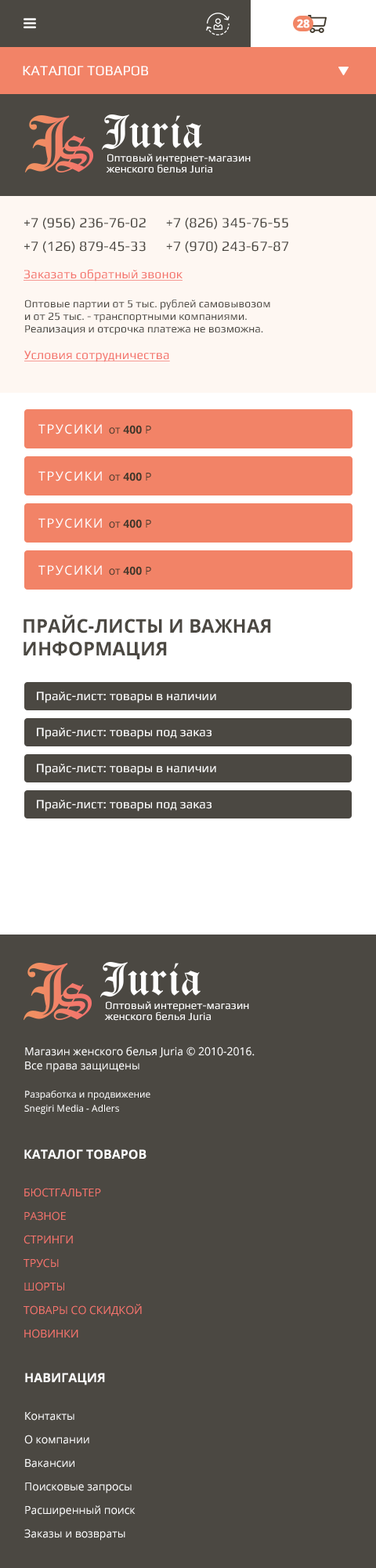
<style>
.page{position:relative;width:376px;height:1568px;background:#4b4842}
.page>*{position:absolute;margin:0}
.t1{font:11px "OpenSans-Bold";color:#fefefe;font-weight:bold}
.t2{font:14.1px "Play";color:#ffffff;text-transform:uppercase}
.t3{font:11px/11px "Play";color:#fefefe}
.t4{font:14.1px/23.5px "Play";color:#4a4741}
.t5{font:12.5px "Play";color:#f4746c;text-decoration:underline}
.t6{font:11px/12.5px "Play";color:#4a4741}
.t7{font:12.5px "OpenSans";letter-spacing:0.1em;color:#fefefe;text-transform:uppercase}
.t8{font:11px "OpenSans";color:#3e372b}
.t9{font:11px "OpenSans-Bold";color:#3e372b}
.t10{font:18.8px "OpenSans-Bold";color:#4b4842;text-transform:uppercase}
.t11{font:12.5px "Play";color:#fefefe}
.t12{font:11px/14.1px "OpenSans";color:#fefefe}
.t13{font:9.4px/14.1px "OpenSans";color:#fefefe}
.t14{font:11px/23.5px "OpenSans";color:#f4746d;text-transform:uppercase}
.t15{font:12.5px/14.1px "OpenSans-Bold";color:#fefefe;text-transform:uppercase}
.t16{font:11px/23.5px "OpenSans";color:#fefefe}
</style>
<div class="page">
<p class="t1" style="left:297px;top:19px;width:13px;height:9px">28</p>
<p class="t2" style="left:23px;top:66px;width:125px;height:10px">каталог товаров</p>
<p class="t3" style="left:106px;top:154px;width:145px;height:19px">Оптовый интернет-магазин<br>женского белья Juria</p>
<p class="t4" style="left:24px;top:217px;width:265px;height:36px">+7 (956) 236-76-02      +7 (826) 345-76-55<br>+7 (126) 879-45-33      +7 (970) 243-67-87</p>
<p class="t5" style="left:24px;top:269px;width:159px;height:12px">Заказать обратный звонок</p>
<p class="t6" style="left:25px;top:299px;width:245px;height:36px">Оптовые партии от 5 тыс. рублей самовывозом<br>и от 25 тыс. - транспортными компаниями.<br>Реализация и отсрочка платежа не возможна.</p>
<p class="t5" style="left:24px;top:350px;width:146px;height:12px">Условия сотрудничества</p>
<p class="t7" style="left:38px;top:424px;width:113px;height:10px">ТРУСИКИ <span class="t8">от </span><span class="t9">400</span><span class="t8"> Р</span></p>
<p class="t7" style="left:38px;top:471px;width:113px;height:10px">ТРУСИКИ <span class="t8">от </span><span class="t9">400</span><span class="t8"> Р</span></p>
<p class="t7" style="left:38px;top:518px;width:113px;height:10px">ТРУСИКИ <span class="t8">от </span><span class="t9">400</span><span class="t8"> Р</span></p>
<p class="t7" style="left:38px;top:565px;width:113px;height:10px">ТРУСИКИ <span class="t8">от </span><span class="t9">400</span><span class="t8"> Р</span></p>
<p class="t10" style="left:24px;top:615px;width:247px;height:44px">ПРАЙС-ЛИСТЫ и Важная<br>информация</p>
<p class="t11" style="left:37px;top:691px;width:179px;height:12px">Прайс-лист: товары в наличии</p>
<p class="t11" style="left:37px;top:728px;width:175px;height:11px">Прайс-лист: товары под заказ</p>
<p class="t11" style="left:37px;top:764px;width:179px;height:11px">Прайс-лист: товары в наличии</p>
<p class="t11" style="left:37px;top:800px;width:175px;height:11px">Прайс-лист: товары под заказ</p>
<p class="t3" style="left:104px;top:1001px;width:145px;height:20px">Оптовый интернет-магазин<br>женского белья Juria</p>
<p class="t12" style="left:24px;top:1047px;width:231px;height:67px">Магазин женского белья Juria © 2010-2016.<br>Все права защищены<br><span class="t13"> <br>Разработка и продвижение<br>Snegiri Media - Adlers</span></p>
<p class="t14" style="left:24px;top:1149px;width:123px;height:189px"><span class="t15">Каталог товаров<br><br></span>БЮСТГАЛЬТЕР<br>РАЗНОЕ<br>СТРИНГИ<br>ТРУСЫ<br>ШОРТЫ<br>ТОВАРЫ СО СКИДКОЙ<br>НОВИНКИ</p>
<p class="t16" style="left:24px;top:1373px;width:112px;height:168px"><span class="t15">НАВИГАЦИЯ<br><br></span>Контакты<br>О компании<br>Вакансии<br>Поисковые запросы<br>Расширенный поиск<br>Заказы и возвраты</p>
</div>
